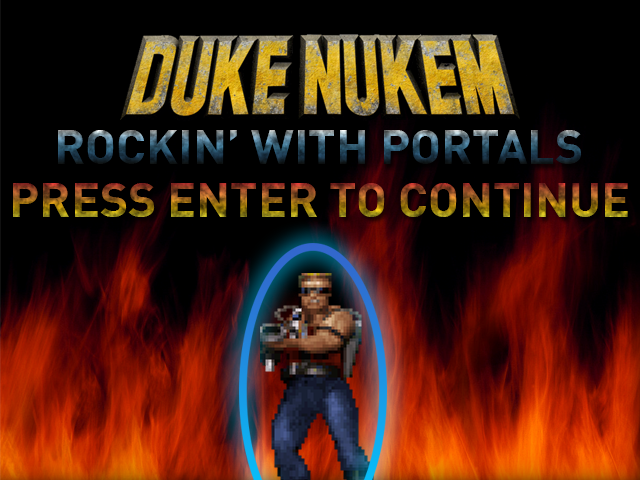
<style>
.page{position:relative;width:640px;height:480px;background:#000000}
.page>*{position:absolute;margin:0}
.t1{font:48px "DIN-Bold"}
</style>
<div class="page">
<p class="t1" style="left:58px;top:130px;width:524px;height:34px">ROCKIN’ WITH PORTALS</p>
<p class="t1" style="left:13px;top:183px;width:615px;height:34px">PRESS ENTER TO CONTINUE</p>
</div>
